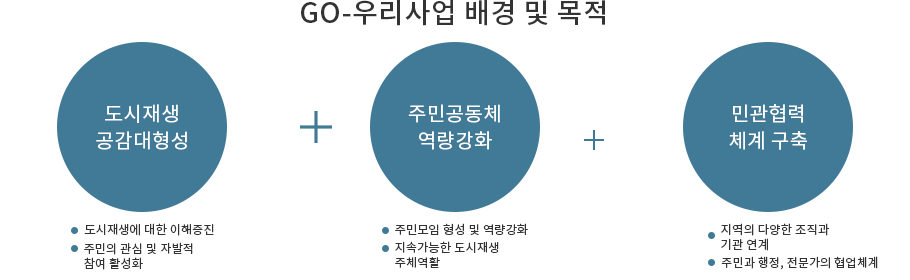
<style>
.page{position:relative;width:910px;height:280px;background:#ffffff}
.page>*{position:absolute;margin:0}
.t1{font:28px "NotoSansKR-Medium";letter-spacing:0.02em;color:#333333}
.t2{font:20px "NotoSansKR-Regular";letter-spacing:0.02em;color:#ffffff}
.t3{font:12px "NotoSansKR-Regular";letter-spacing:0.02em;color:#333333}
.t4{font:11.9px "NotoSansKR-Regular";letter-spacing:0.02em;color:#333333}
.t5{font:12.2px/15.1px "NotoSansKR-Regular";letter-spacing:0.02em;color:#333333}
.t6{font:12px/15px "NotoSansKR-Regular";letter-spacing:0.02em;color:#333333}
.t7{font:11.9px/14.8px "NotoSansKR-Regular";letter-spacing:0.02em;color:#333333}
</style>
<div class="page">
<p class="t1" style="left:301px;top:0px;width:304px;height:26px">GO-우리사업 배경 및 목적</p>
<p class="t2" style="left:105px;top:104px;width:73px;height:19px">도시재생</p>
<p class="t2" style="left:408px;top:104px;width:92px;height:19px">주민공동체</p>
<p class="t2" style="left:733px;top:104px;width:70px;height:19px">민관협력</p>
<p class="t2" style="left:96px;top:131px;width:91px;height:19px">공감대형성</p>
<p class="t2" style="left:419px;top:131px;width:73px;height:19px">역량강화</p>
<p class="t2" style="left:729px;top:131px;width:78px;height:19px">체계 구축</p>
<p class="t3" style="left:84px;top:223px;width:130px;height:13px">도시재생에 대한 이해증진</p>
<p class="t4" style="left:395px;top:223px;width:133px;height:12px">주민모임 형성 및 역량강화</p>
<p class="t5" style="left:721px;top:223px;width:108px;height:28px">지역의 다양한 조직과<br>기관 연계</p>
<p class="t6" style="left:84px;top:242px;width:109px;height:28px">주민의 관심 및 자발적<br>참여 활성화</p>
<p class="t7" style="left:395px;top:241px;width:104px;height:27px">지속가능한 도시재생<br>주체역활</p>
<p class="t3" style="left:721px;top:256px;width:157px;height:14px">주민과 행정, 전문가의 협업체계</p>
</div>
